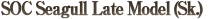
<style>
.page{position:relative;width:214px;height:19px;background:#ffffff}
.page>*{position:absolute;margin:0}
.t1{font:18px "RyuminPro-ExBold";letter-spacing:-0.08em;color:#4a3f32;font-weight:bold;scale:0.9 1}
</style>
<div class="page">
<p class="t1" style="left:1px;top:1px;width:202px;height:18px">SOC Seagull Late Model (Sk.)</p>
</div>
